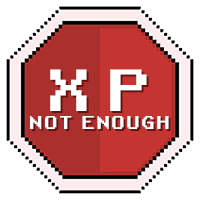
<style>
.page{position:relative;width:200px;height:200px;background:#ffffff}
.page>*{position:absolute;margin:0}
.t1{font:57.2px "RetroGaming";letter-spacing:0.26em;color:#ffffff}
.t2{font:18px "RetroGaming";letter-spacing:0.06em;color:#ffffff}
</style>
<div class="page">
<p class="t1" style="left:50px;top:69px;width:97px;height:42px">XP</p>
<p class="t1" style="left:52px;top:71px;width:97px;height:42px">XP</p>
<p class="t2" style="left:30px;top:116px;width:139px;height:13px">NOT ENOUGH</p>
</div>
